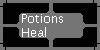
<style>
.page{position:relative;width:100px;height:50px;background:#020202}
.page>*{position:absolute;margin:0}
.t1{font:12px "LucidaSans";color:#ffffff}
</style>
<div class="page">
<p class="t1" style="left:22px;top:14px;width:41px;height:23px">Potions<br>Heal</p>
</div>
